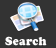
<style>
.page{position:relative;width:56px;height:48px;background:#333333}
.page>*{position:absolute;margin:0}
.t1{font:12px "CooperBlack";color:#fefdfd}
</style>
<div class="page">
<p class="t1" style="left:5px;top:36px;width:42px;height:10px">Search</p>
</div>
